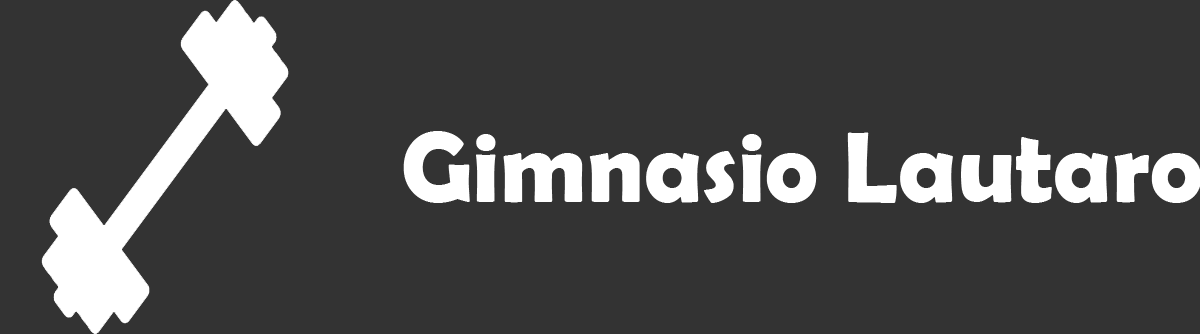
<style>
.page{position:relative;width:1200px;height:334px;background:#333333}
.page>*{position:absolute;margin:0}
.t1{font:100px "BerlinSansFBDemi-Bold";color:#ffffff}
</style>
<div class="page">
<p class="t1" style="left:403px;top:131px;width:799px;height:72px">Gimnasio Lautaro</p>
</div>
